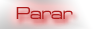
<style>
.page{position:relative;width:94px;height:29px}
.page>*{position:absolute;margin:0}
.t1{font:18px "MicrogrammaD-MediExte";color:#ae1e1e}
</style>
<div class="page">
<p class="t1" style="left:16px;top:7px;width:57px;height:12px">Parar</p>
</div>
